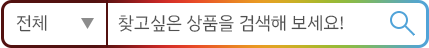
<style>
.page{position:relative;width:429px;height:48px;background:#ffffff}
.page>*{position:absolute;margin:0}
.t1{font:18px "IBMPlexSansKR";color:#505050}
</style>
<div class="page">
<p class="t1" style="left:16px;top:15px;width:31px;height:17px">전체</p>
<p class="t1" style="left:118px;top:15px;width:225px;height:17px">찾고싶은 상품을 검색해 보세요!</p>
</div>
